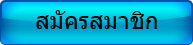
<style>
.page{position:relative;width:193px;height:45px}
.page>*{position:absolute;margin:0}
.t1{font:24px "Tahoma";color:#040404}
</style>
<div class="page">
<p class="t1" style="left:36px;top:10px;width:121px;height:19px">สมัครสมาชิก</p>
</div>
